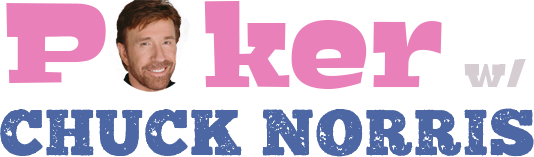
<style>
.page{position:relative;width:534px;height:157px;background:#ffffff}
.page>*{position:absolute;margin:0}
.t1{font:120.4px "Bigfish-Black";letter-spacing:0.015em;color:#e980ba}
.t2{font:42.6px "Bigfish-Black";letter-spacing:0.015em;color:#d6cdd2}
.t3{font:70.1px "Distractor-Roman";letter-spacing:0.015em;color:#4c67a3}
</style>
<div class="page">
<p class="t1" style="left:6px;top:3px;width:100px;height:80px">P</p>
<p class="t1" style="left:204px;top:1px;width:238px;height:88px">ker</p>
<p class="t2" style="left:464px;top:59px;width:62px;height:28px">w/</p>
<p class="t3" style="left:0px;top:108px;width:534px;height:49px">CHUCK NORRIS</p>
</div>
